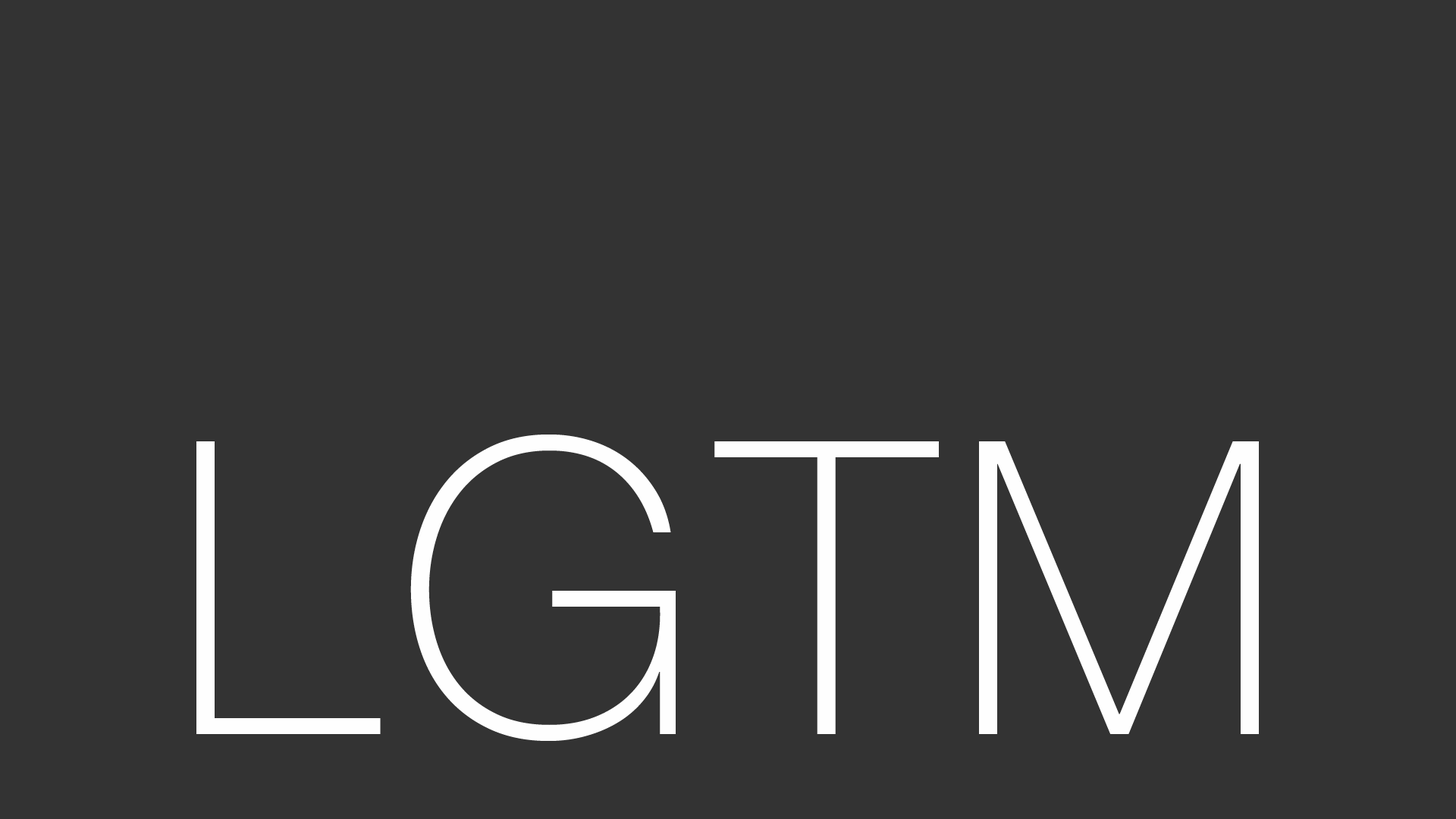
<style>
.page{position:relative;width:1456px;height:819px;background:#333333}
.page>*{position:absolute;margin:0}
.t1{font:409.5px "HelveticaNeue-Thin";letter-spacing:0.05em;color:#fefefe}
</style>
<div class="page">
<p class="t1" style="left:196px;top:435px;width:1063px;height:306px">LGTM</p>
</div>
